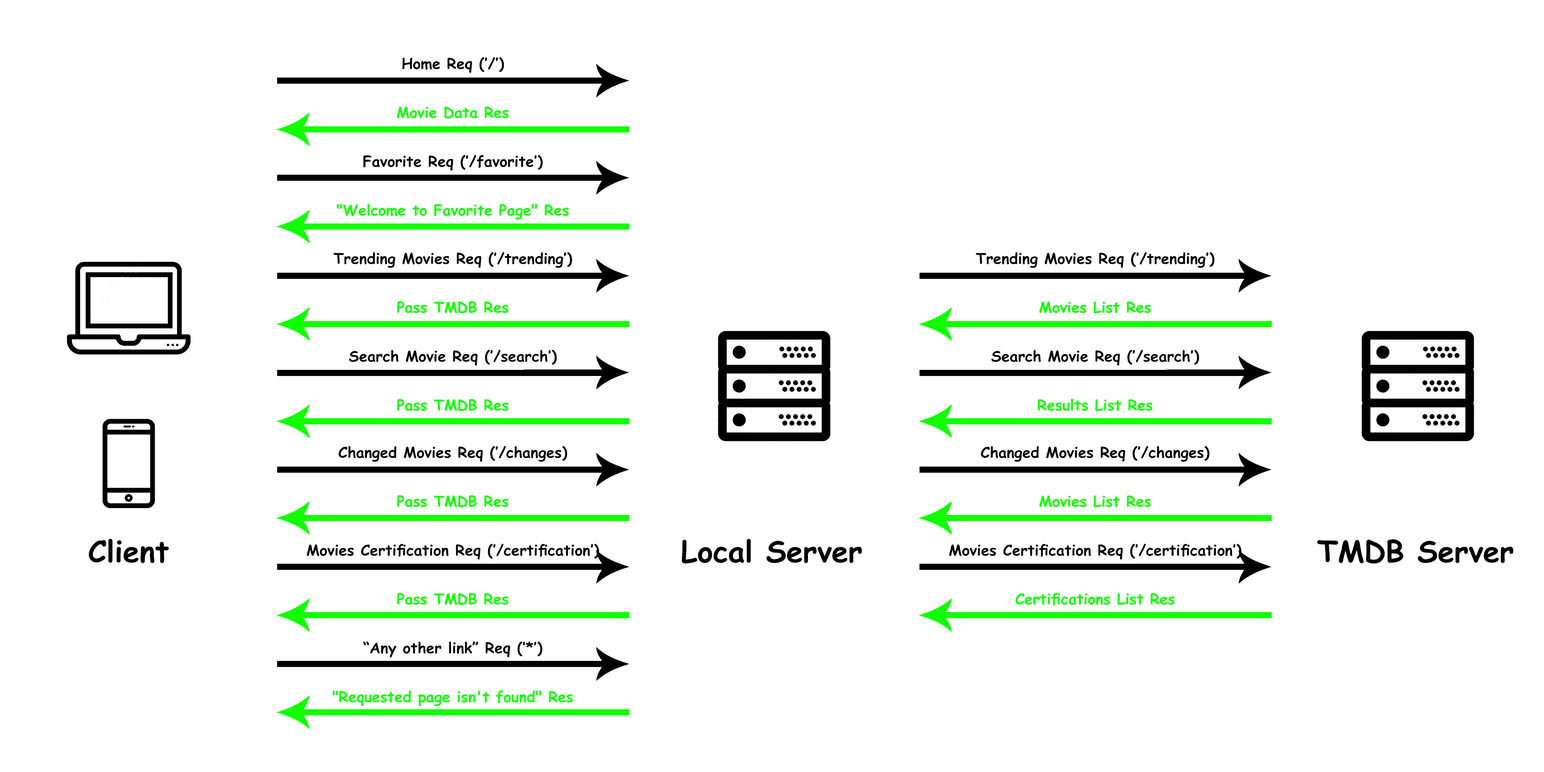
<style>
.page{position:relative;width:1544px;height:772px;background:#ffffff}
.page>*{position:absolute;margin:0}
.t1{font:14.9px "ComicSansMS-Bold";color:#000000}
.t2{font:14.9px "ComicSansMS-Bold";color:#12ff00}
.t3{font:29.7px "ComicSansMS-Bold";color:#000000}
</style>
<div class="page">
<p class="t1" style="left:402px;top:57px;width:102px;height:16px">Home Req (’/’)</p>
<p class="t2" style="left:397px;top:106px;width:112px;height:13px">Movie Data Res</p>
<p class="t1" style="left:363px;top:155px;width:180px;height:16px">Favorite Req (’/favorite’)</p>
<p class="t2" style="left:337px;top:204px;width:232px;height:16px">"Welcome to Favorite Page" Res</p>
<p class="t1" style="left:333px;top:252px;width:239px;height:16px">Trending Movies Req (’/trending’)</p>
<p class="t1" style="left:976px;top:252px;width:239px;height:16px">Trending Movies Req (’/trending’)</p>
<p class="t2" style="left:397px;top:301px;width:112px;height:13px">Pass TMDB Res</p>
<p class="t2" style="left:1039px;top:302px;width:112px;height:11px">Movies List Res</p>
<p class="t1" style="left:349px;top:350px;width:208px;height:16px">Search Movie Req (’/search’)</p>
<p class="t1" style="left:991px;top:350px;width:208px;height:16px">Search Movie Req (’/search’)</p>
<p class="t2" style="left:397px;top:399px;width:112px;height:12px">Pass TMDB Res</p>
<p class="t2" style="left:1038px;top:399px;width:115px;height:12px">Results List Res</p>
<p class="t1" style="left:339px;top:446px;width:228px;height:16px">Changed Movies Req (’/changes)</p>
<p class="t1" style="left:981px;top:446px;width:229px;height:16px">Changed Movies Req (’/changes)</p>
<p class="t2" style="left:397px;top:495px;width:112px;height:13px">Pass TMDB Res</p>
<p class="t2" style="left:1039px;top:496px;width:112px;height:12px">Movies List Res</p>
<p class="t3" style="left:88px;top:539px;width:81px;height:25px">Client</p>
<p class="t1" style="left:307px;top:544px;width:292px;height:16px">Movies Certification Req (’/certification’)</p>
<p class="t3" style="left:682px;top:539px;width:180px;height:25px">Local Server</p>
<p class="t1" style="left:949px;top:544px;width:293px;height:16px">Movies Certification Req (’/certification’)</p>
<p class="t3" style="left:1317px;top:540px;width:197px;height:24px">TMDB Server</p>
<p class="t2" style="left:397px;top:593px;width:112px;height:12px">Pass TMDB Res</p>
<p class="t2" style="left:1015px;top:593px;width:160px;height:13px">Certifications List Res</p>
<p class="t1" style="left:363px;top:642px;width:180px;height:16px">“Any other link” Req (’*’)</p>
<p class="t2" style="left:333px;top:691px;width:240px;height:16px">"Requested page isn't found" Res</p>
</div>
